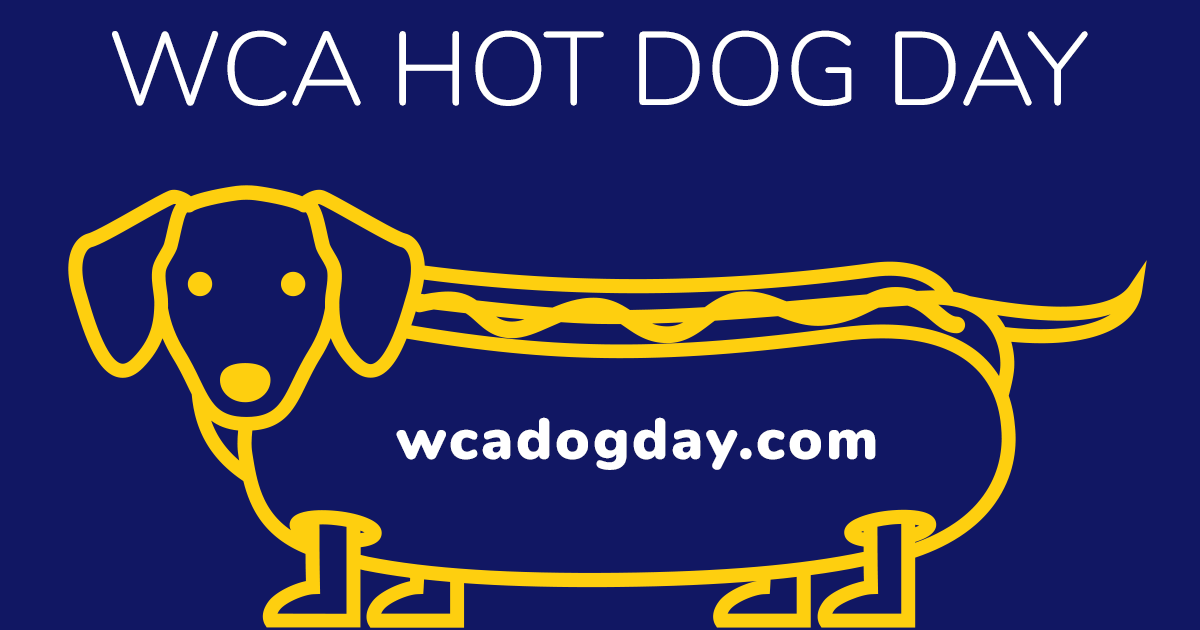
<style>
.page{position:relative;width:1200px;height:630px;background:#111763}
.page>*{position:absolute;margin:0}
.t1{font:104px "Nunito-Light";color:#ffffff;text-transform:uppercase}
.t2{font:58px "Nunito-Black";letter-spacing:0.05em;color:#ffffff}
</style>
<div class="page">
<p class="t1" style="left:112px;top:30px;width:976px;height:76px">WCA Hot Dog Day</p>
<p class="t2" style="left:396px;top:417px;width:480px;height:53px">wcadogday.com</p>
</div>
